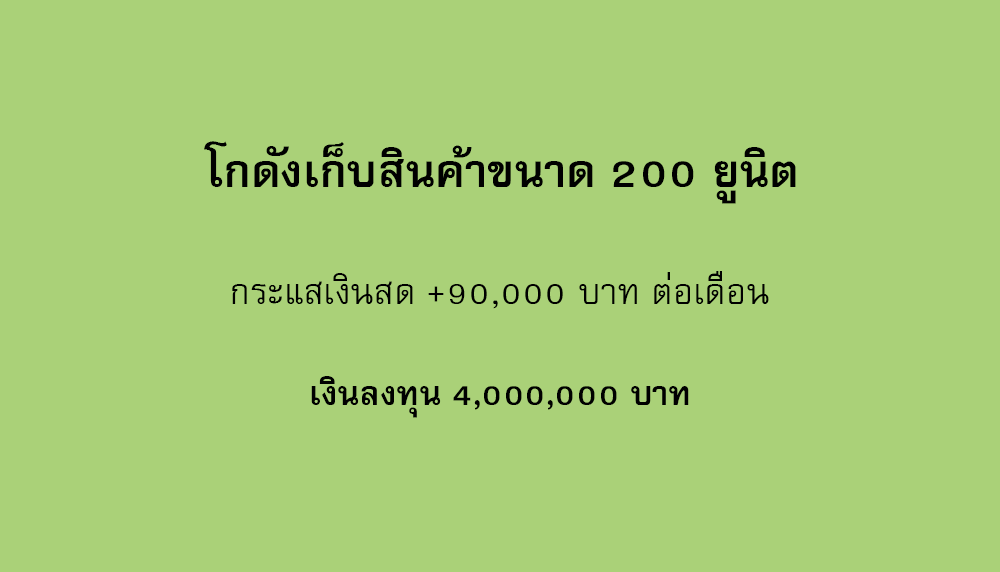
<style>
.page{position:relative;width:1000px;height:572px;background:#aad178}
.page>*{position:absolute;margin:0}
.t1{font:64px "FreesiaUPCBold";color:#000000}
.t2{font:50px "FreesiaUPC";color:#000000}
.t3{font:47px "FreesiaUPCBold";color:#000000}
</style>
<div class="page">
<p class="t1" style="left:204px;top:141px;width:592px;height:63px">โกดังเก็บสินค้าขนาด 200 ยูนิต</p>
<p class="t2" style="left:232px;top:271px;width:537px;height:38px">กระแสเงินสด +90,000 บาท ต่อเดือน</p>
<p class="t3" style="left:311px;top:376px;width:378px;height:42px">เงินลงทุน 4,000,000 บาท</p>
</div>
